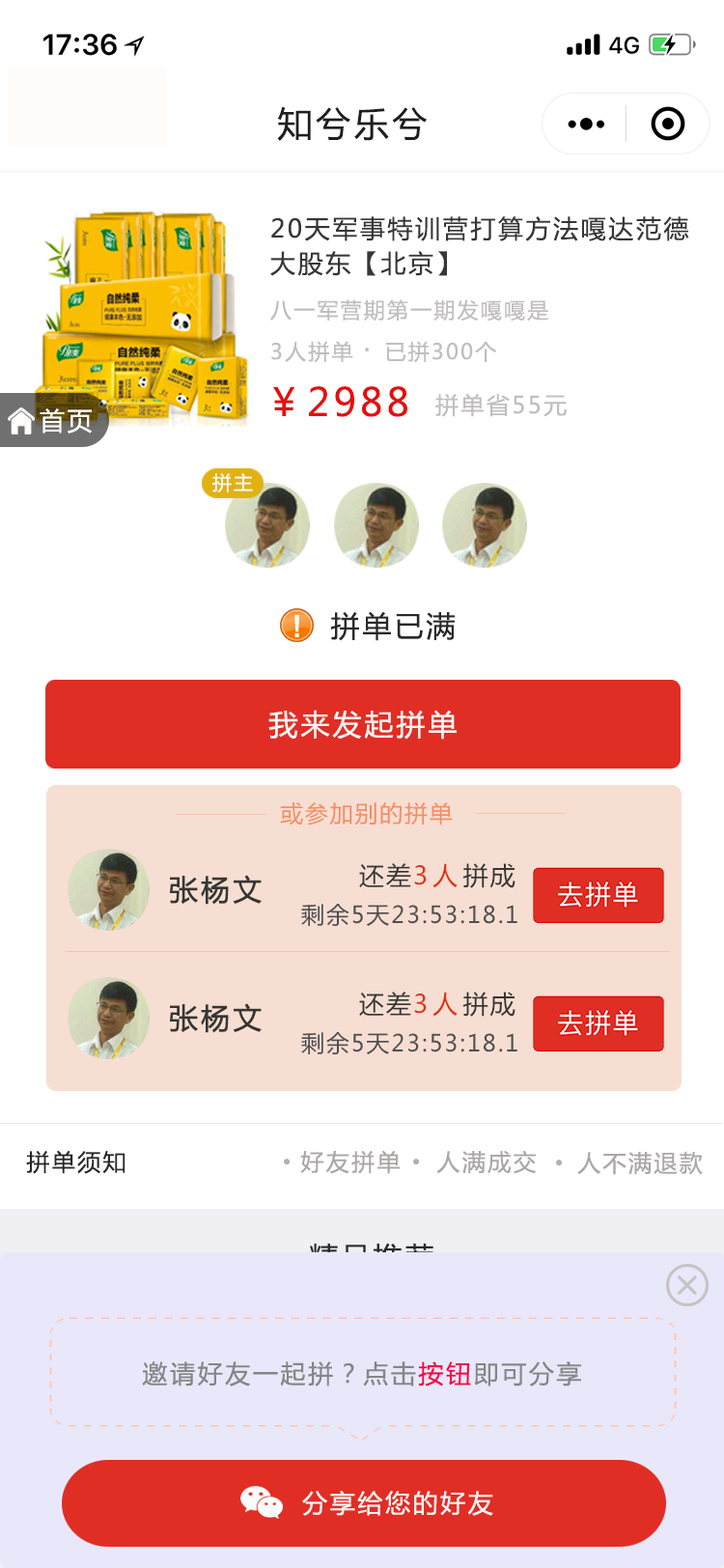
<style>
.page{position:relative;width:724px;height:1568px;background:#ffffff}
.page>*{position:absolute;margin:0}
.t1{font:34.8px "MicrosoftYaHei";letter-spacing:0.1em;color:#201f20}
.t2{font:25.1px/34.8px "MicrosoftYaHei";letter-spacing:0.1em;color:#373636}
.t3{font:21.2px "MicrosoftYaHei";letter-spacing:0.1em;color:#c0bebe}
.t4{font:29px "MicrosoftYaHei";letter-spacing:0.1em;color:#c0bebe}
.t5{font:38.6px "MicrosoftYaHei";letter-spacing:0.1em;color:#e70e0e}
.t6{font:23.2px "MicrosoftYaHei";letter-spacing:0.1em;color:#c0bebe}
.t7{font:25.1px "MicrosoftYaHei";letter-spacing:0.1em;color:#fefcfc}
.t8{font:19.3px "MicrosoftYaHei";letter-spacing:0.1em;color:#fcfbf8}
.t9{font:29px "MicrosoftYaHei";letter-spacing:0.1em;color:#282829}
.t10{font:29px "MicrosoftYaHei";letter-spacing:0.1em;color:#fbf6f6}
.t11{font:23.2px "MicrosoftYaHei";letter-spacing:0.075em;color:#f48d60}
.t12{font:25.1px "MicrosoftYaHei";letter-spacing:0.075em;color:#353634}
.t13{font:25.1px "MicrosoftYaHei";letter-spacing:0.2em;color:#dd3412}
.t14{font:29px "MicrosoftYaHei";letter-spacing:0.075em;color:#353634;font-weight:bold}
.t15{font:23.2px "MicrosoftYaHei";letter-spacing:0.075em;color:#4f4f4f}
.t16{font:23.2px "MicrosoftYaHei";letter-spacing:0.1em;color:#282727}
.t17{font:23.2px "MicrosoftYaHei";letter-spacing:0.1em;color:#9c9999}
.t18{font:46.3px "MicrosoftYaHei";letter-spacing:0.1em;color:#b0b0b0}
.t19{font:29px "MicrosoftYaHei";letter-spacing:0.1em;color:#e9e8fb}
.t20{font:25.1px "MicrosoftYaHei";letter-spacing:0.1em;color:#868687}
.t21{font:25.1px "MicrosoftYaHei";letter-spacing:0.1em;color:#f40548}
.t22{font:25.1px "MicrosoftYaHei";letter-spacing:0.1em;color:#faf5f5}
</style>
<div class="page">
<p class="t1" style="left:277px;top:106px;width:150px;height:35px">知兮乐兮</p>
<p class="t2" style="left:270px;top:216px;width:419px;height:60px">20天军事特训营打算方法嘎达范德<br>大股东【北京】</p>
<p class="t3" style="left:270px;top:299px;width:279px;height:23px">八一军营期第一期发嘎嘎是</p>
<p class="t3" style="left:271px;top:341px;width:225px;height:22px">3人拼单 <span class="t4">· </span>已拼300个</p>
<p class="t5" style="left:273px;top:386px;width:134px;height:31px">￥2988</p>
<p class="t6" style="left:435px;top:393px;width:132px;height:24px">拼单省55元</p>
<p class="t7" style="left:40px;top:408px;width:52px;height:26px">首页</p>
<p class="t8" style="left:212px;top:473px;width:41px;height:19px">拼主</p>
<p class="t9" style="left:330px;top:611px;width:125px;height:30px">拼单已满</p>
<p class="t10" style="left:268px;top:710px;width:189px;height:30px">我来发起拼单</p>
<p class="t11" style="left:280px;top:802px;width:173px;height:24px">或参加别的拼单</p>
<p class="t12" style="left:359px;top:863px;width:157px;height:25px">还差<span class="t13">3人</span>拼成</p>
<p class="t14" style="left:170px;top:875px;width:92px;height:30px">张杨文</p>
<p class="t15" style="left:301px;top:904px;width:217px;height:22px">剩余5天23:53:18.1</p>
<p class="t12" style="left:359px;top:992px;width:157px;height:25px">还差<span class="t13">3人</span>拼成</p>
<p class="t14" style="left:170px;top:1003px;width:92px;height:30px">张杨文</p>
<p class="t15" style="left:301px;top:1032px;width:217px;height:22px">剩余5天23:53:18.1</p>
<p class="t16" style="left:26px;top:1150px;width:100px;height:24px">拼单须知</p>
<p class="t17" style="left:300px;top:1150px;width:101px;height:24px;opacity:0.88">好友拼单</p>
<p class="t17" style="left:436px;top:1150px;width:100px;height:24px;opacity:0.88">人满成交</p>
<p class="t17" style="left:577px;top:1151px;width:126px;height:24px;opacity:0.88">人不满退款</p>
<p class="t18" style="left:284px;top:1159px;width:7px;height:6px">·</p>
<p class="t18" style="left:413px;top:1159px;width:7px;height:6px">·</p>
<p class="t18" style="left:556px;top:1160px;width:7px;height:6px">·</p>
<p class="t19" style="left:309px;top:1243px;width:125px;height:30px">精品推荐</p>
<p class="t20" style="left:142px;top:1361px;width:439px;height:25px">邀请好友一起拼？点击<span class="t21">按钮</span>即可分享</p>
<p class="t22" style="left:302px;top:1491px;width:191px;height:25px">分享给您的好友</p>
</div>
